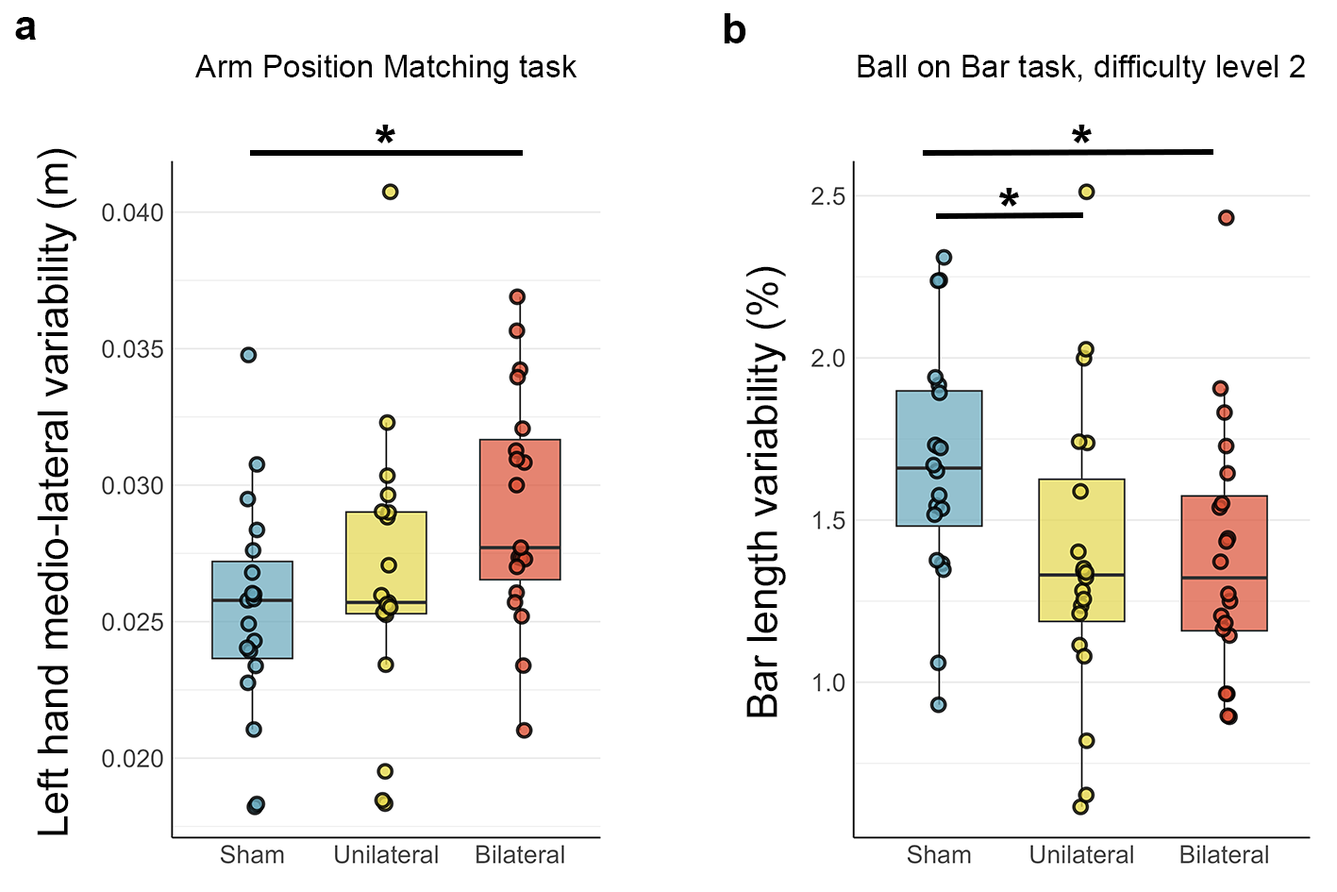
<style>
.page{position:relative;width:1337px;height:892px;background:#ffffff}
.page>*{position:absolute;margin:0}
.t1{font:41.9px "Arial-BoldMT";color:#000000}
.t2{font:31.5px "ArialMT";color:#000000}
.t3{font:52.4px "Arial-Black";color:#000000}
.t4{font:41.9px "ArialMT";color:#000000}
</style>
<div class="page">
<p class="t1" style="left:15px;top:17px;width:21px;height:23px">a</p>
<p class="t1" style="left:724px;top:13px;width:22px;height:30px">b</p>
<p class="t2" style="left:195px;top:55px;width:383px;height:29px">Arm Position Matching task</p>
<p class="t2" style="left:858px;top:55px;width:447px;height:29px">Ball on Bar task, difficulty level 2</p>
<p class="t3" style="left:375px;top:125px;width:20px;height:18px">*</p>
<p class="t3" style="left:1071px;top:125px;width:21px;height:18px">*</p>
<p class="t4" style="left:37px;top:148px;width:39px;height:687px;rotate:-90deg">Left hand medio-lateral variability (m)</p>
<p class="t3" style="left:998px;top:188px;width:21px;height:19px">*</p>
<p class="t4" style="left:746px;top:266px;width:40px;height:451px;rotate:-90deg">Bar length variability (%)</p>
</div>
